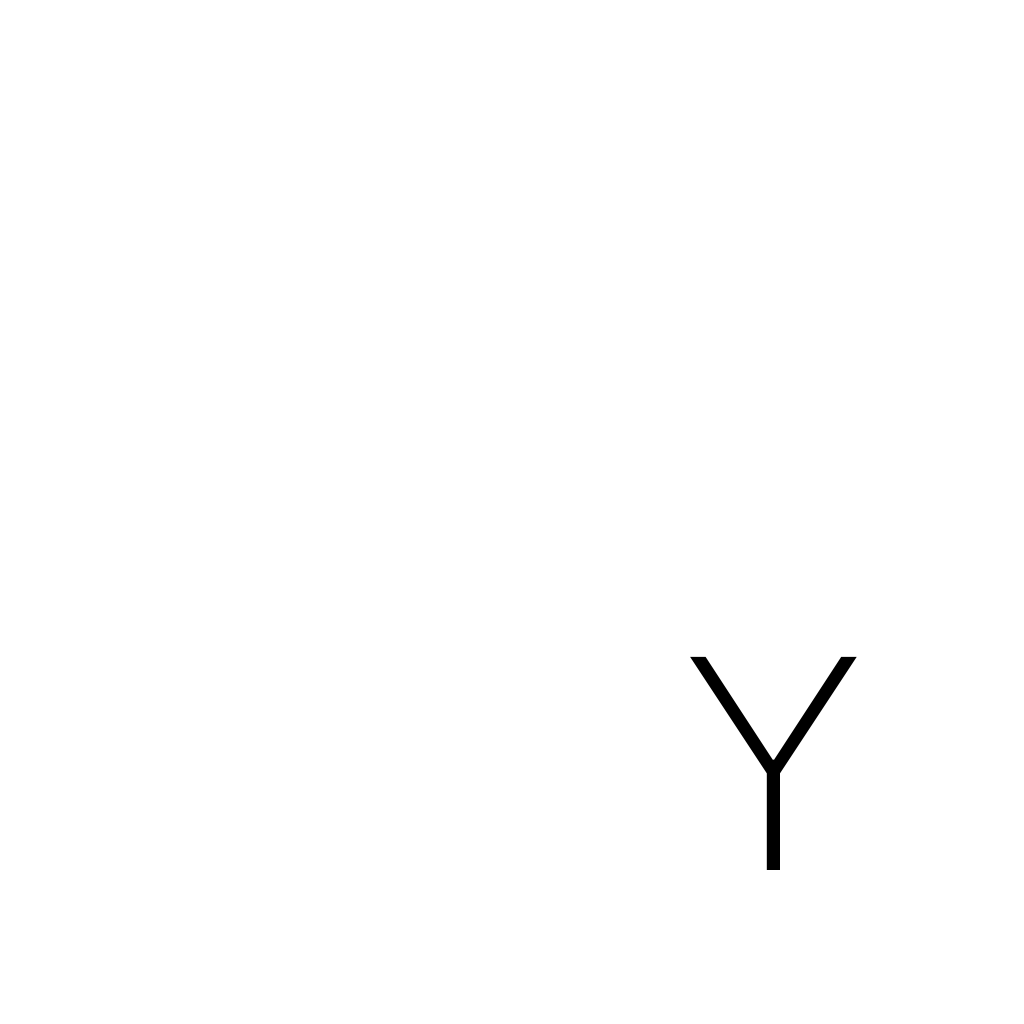
<style>
.page{position:relative;width:1024px;height:1024px;background:#ffffff}
.page>*{position:absolute;margin:0}
.t1{font:292.8px "Inter-ExtraLight";color:#000000}
</style>
<div class="page">
<p class="t1" style="left:690px;top:656px;width:167px;height:214px">Y</p>
</div>
